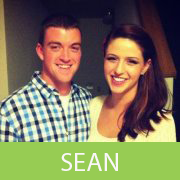
<style>
.page{position:relative;width:180px;height:180px;background:#97cc53}
.page>*{position:absolute;margin:0}
.t1{font:26.7px "MyriadPro-Regular";color:#faf7f7}
</style>
<div class="page">
<p class="t1" style="left:61px;top:153px;width:57px;height:18px">SEAN</p>
</div>
